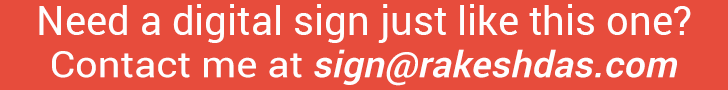
<style>
.page{position:relative;width:728px;height:90px;background:#e74c3c}
.page>*{position:absolute;margin:0}
.t1{font:40px "Roboto-Regular";color:#fefefe}
.t2{font:36.3px "Roboto-MediumItalic";color:#fefefe;scale:1.1 1}
.t3{font:36.3px "Roboto-Regular";color:#fefefe;scale:1.1 1}
</style>
<div class="page">
<p class="t1" style="left:39px;top:4px;width:652px;height:39px">Need a digital sign just like this one?</p>
<p class="t2" style="left:52px;top:49px;width:625px;height:37px"><span class="t3">Contact me at </span>sign@rakeshdas.com</p>
</div>
